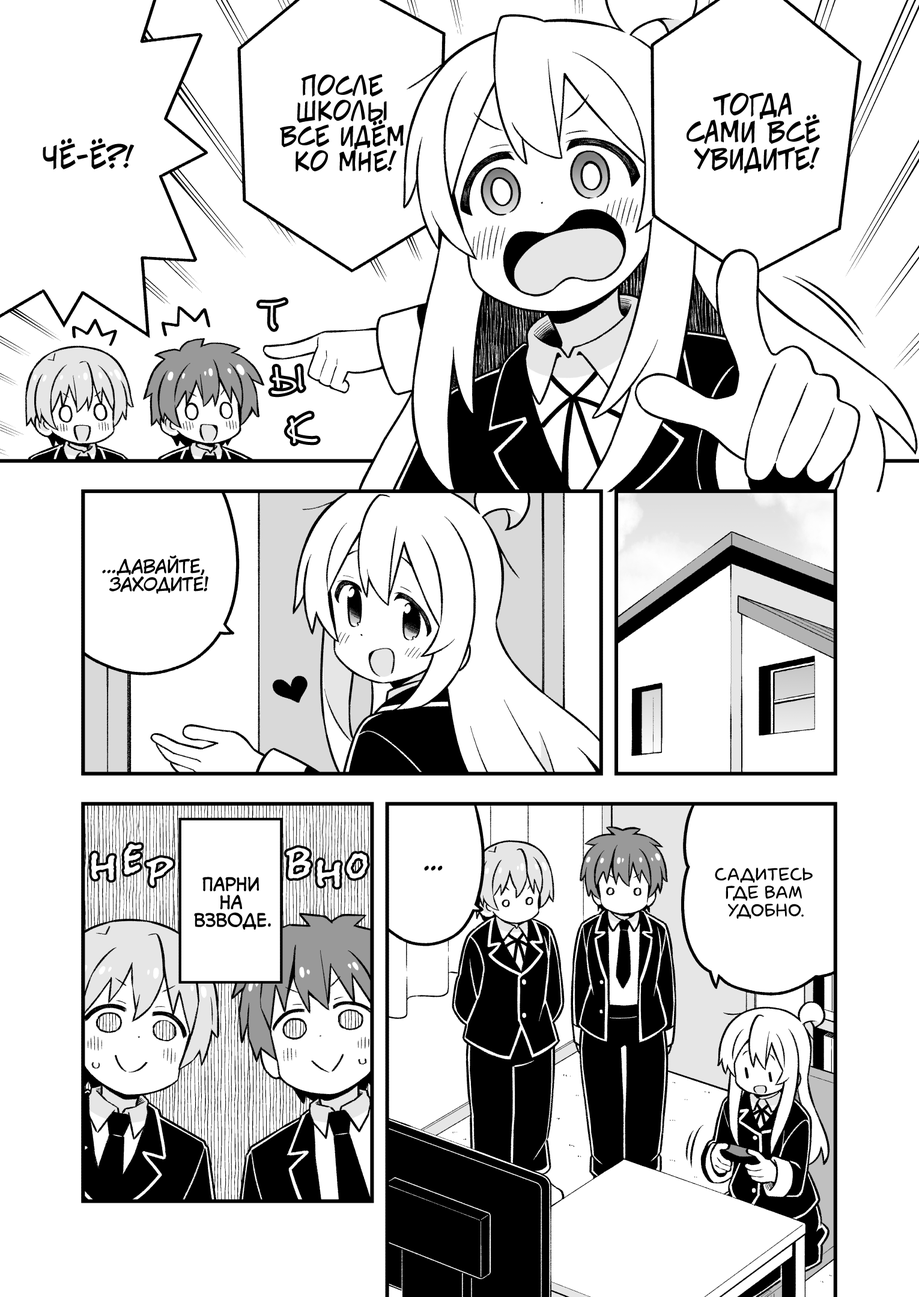
<style>
.page{position:relative;width:919px;height:1297px;background:#ffffff}
.page>*{position:absolute;margin:0}
.t1{font:25.2px "v_CCJeffCampbell";color:#000000;text-transform:uppercase}
.t2{font:27px "v_CCJeffCampbell";color:#000000;text-transform:uppercase}
.t3{font:28.8px "v_CCJeffCampbell";color:#000000;text-transform:uppercase}
.t4{font:39.6px "DSNote";color:#ffffff}
.t5{font:18px "KuraiVoice2";color:#000000;text-transform:uppercase}
.t6{font:43.2px "el_CCEvilSchemes";color:#ffffff;text-transform:uppercase}
.t7{font:25.2px "KuraiVoice2";color:#000000;text-transform:uppercase}
.t8{font:18px "laCartoonerie";color:#000000;text-transform:uppercase}
.t9{font:18px "v_CCMonologous";color:#000000;text-transform:uppercase}
</style>
<div class="page">
<p class="t1" style="left:280px;top:74px;width:124px;height:98px;text-align:center">После<br>школы<br>все идём<br>ко мне!</p>
<p class="t2" style="left:687px;top:93px;width:134px;height:81px;text-align:center">Тогда<br>сами всё<br>увидите!</p>
<p class="t3" style="left:43px;top:138px;width:92px;height:32px">Чё-ё?!</p>
<p class="t4" style="left:271px;top:366px;width:32px;height:29px;rotate:-6deg">ы</p>
<p class="t4" style="left:287px;top:413px;width:31px;height:31px;rotate:-6deg">к</p>
<p class="t5" style="left:102px;top:555px;width:106px;height:39px;text-align:center">...Давайте,<br>заходите!</p>
<p class="t6" style="left:124px;top:844px;width:18px;height:31px">е</p>
<p class="t6" style="left:91px;top:853px;width:24px;height:28px">н</p>
<p class="t6" style="left:146px;top:858px;width:27px;height:29px">р</p>
<p class="t6" style="left:286px;top:848px;width:25px;height:31px">в</p>
<p class="t6" style="left:347px;top:853px;width:21px;height:26px">о</p>
<p class="t6" style="left:317px;top:860px;width:24px;height:28px">н</p>
<p class="t7" style="left:424px;top:866px;width:19px;height:5px">...</p>
<p class="t8" style="left:715px;top:868px;width:98px;height:51px;text-align:center">Садитесь<br>где вам<br>удобно.</p>
<p class="t9" style="left:194px;top:877px;width:77px;height:53px;text-align:center">Парни<br>на<br>взводе.</p>
</div>
